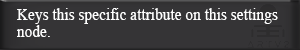
<style>
.page{position:relative;width:300px;height:50px;background:#353436}
.page>*{position:absolute;margin:0}
.t1{font:16.8px "TimesNewRomanPSMT";color:#ffffff;scale:0.92 1}
</style>
<div class="page">
<p class="t1" style="left:17px;top:8px;width:261px;height:29px">Keys this specific attribute on this settings<br>node.</p>
</div>
